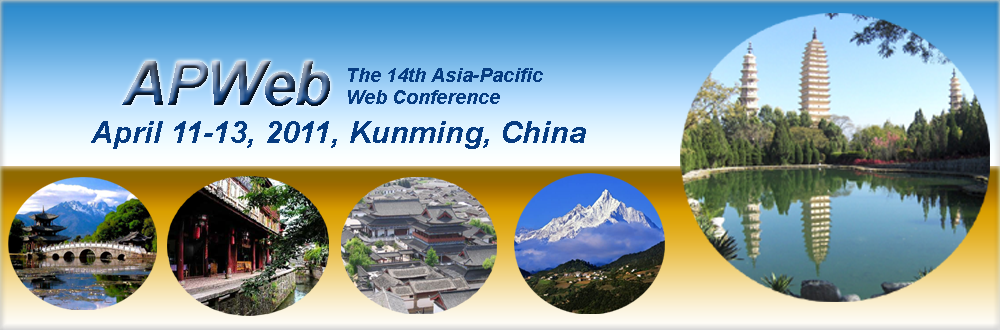
<style>
.page{position:relative;width:1000px;height:330px}
.page>*{position:absolute;margin:0}
.t1{font:60px "Arial-BoldItalicMT"}
.t2{font:18px "Arial-BoldItalicMT";color:#063c81}
.t3{font:30px "Arial-BoldItalicMT";color:#063c81}
</style>
<div class="page">
<p class="t1" style="left:122px;top:61px;width:208px;height:45px">APWeb</p>
<p class="t2" style="left:348px;top:68px;width:195px;height:36px">The 14th Asia-Pacific <br>Web Conference</p>
<p class="t3" style="left:91px;top:121px;width:495px;height:28px">April 11-13, 2011, Kunming, China</p>
</div>
